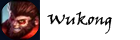
<style>
.page{position:relative;width:140px;height:40px;background:#ffffff}
.page>*{position:absolute;margin:0}
.t1{font:16px "VinerHandITC";color:#000000}
</style>
<div class="page">
<p class="t1" style="left:47px;top:11px;width:65px;height:23px">Wukong</p>
</div>
